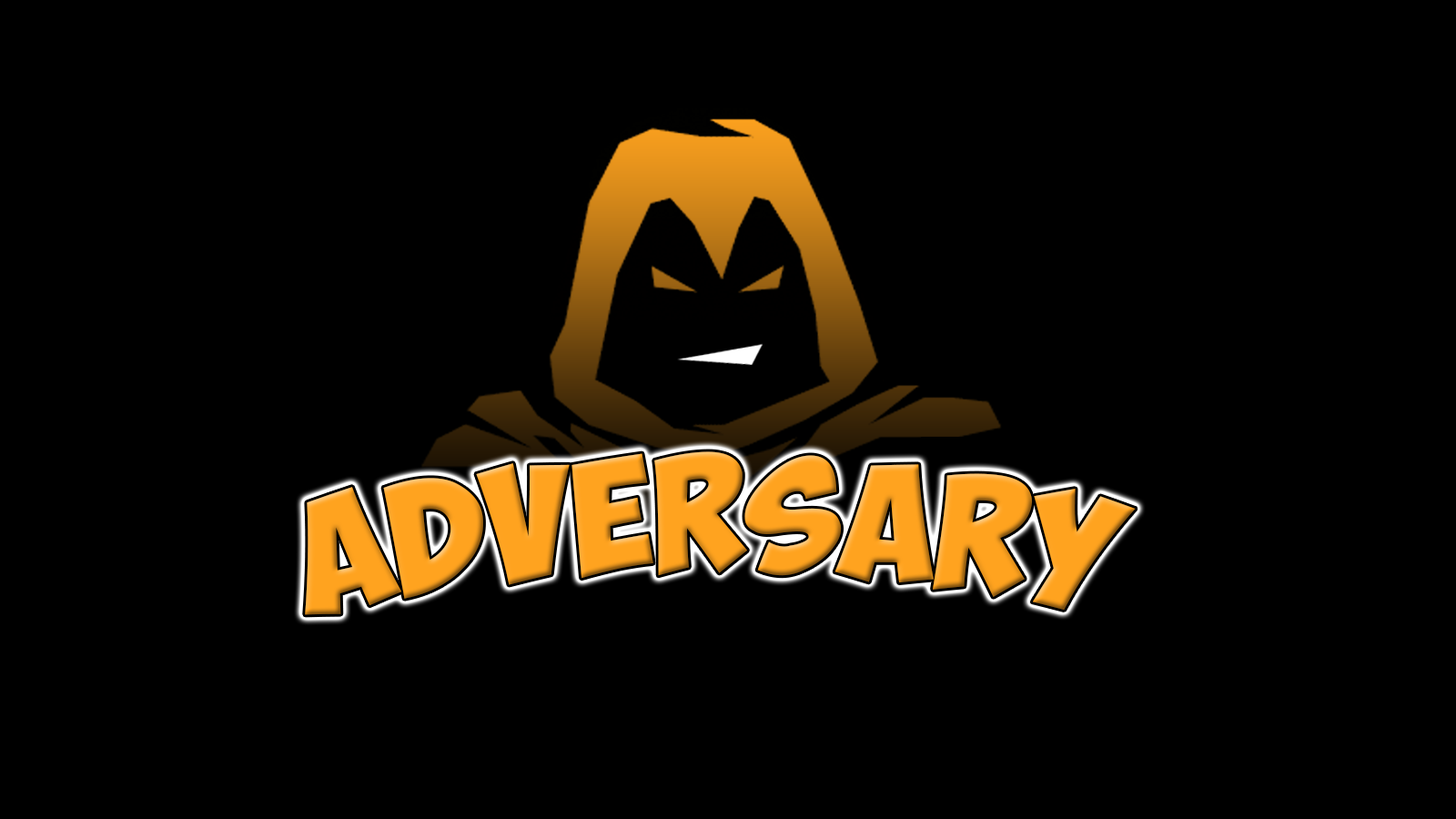
<style>
.page{position:relative;width:1456px;height:819px;background:#000000}
.page>*{position:absolute;margin:0}
.t1{font:10.9px "ObelixPro";color:#ffa31f}
</style>
<div class="page">
<p class="t1" style="left:305px;top:451px;width:831px;height:164px;text-align:center">ADversary</p>
</div>
